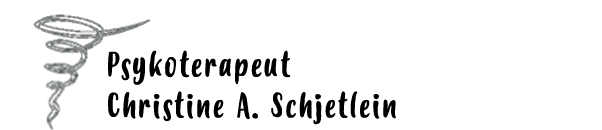
<style>
.page{position:relative;width:602px;height:130px;background:#ffffff}
.page>*{position:absolute;margin:0}
.t1{font:34px "Budidaya";letter-spacing:0.06em;color:#000000}
</style>
<div class="page">
<p class="t1" style="left:108px;top:50px;width:288px;height:75px">Psykoterapeut <br>Christine A. Schjetlein</p>
</div>
